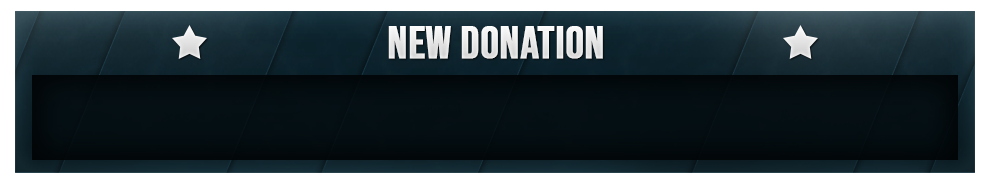
<style>
.page{position:relative;width:989px;height:183px}
.page>*{position:absolute;margin:0}
.t1{font:44.8px "BebasNeue-Regular";color:#ffffff;text-transform:uppercase;font-weight:bold}
</style>
<div class="page">
<p class="t1" style="left:388px;top:26px;width:215px;height:33px">NEW DONATION</p>
</div>
